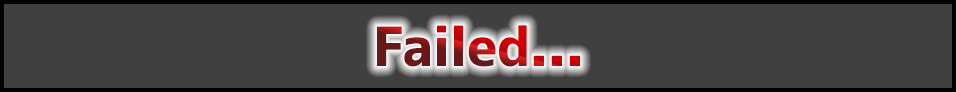
<style>
.page{position:relative;width:956px;height:92px;background:#404040}
.page>*{position:absolute;margin:0}
.t1{font:54.1px "Corporate-Logo-Bold"}
</style>
<div class="page">
<p class="t1" style="left:377px;top:25px;width:203px;height:42px">Failed...</p>
</div>
